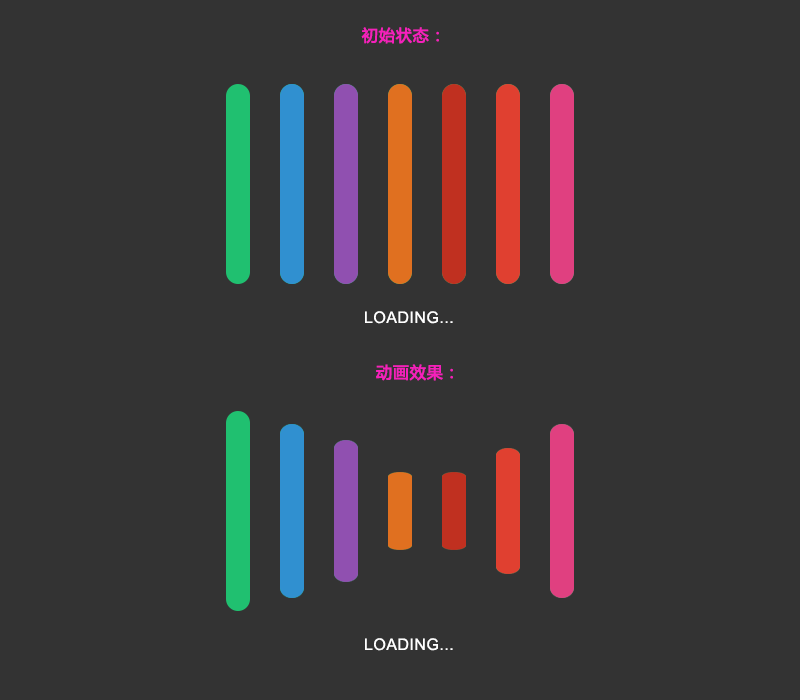
<style>
.page{position:relative;width:800px;height:700px;background:#333333}
.page>*{position:absolute;margin:0}
.t1{font:16px "MicrosoftYaHei";letter-spacing:0.03em;color:#f520bb;font-weight:bold}
.t2{font:16px "ArialMT";letter-spacing:0.03em;color:#ffffff}
</style>
<div class="page">
<p class="t1" style="left:361px;top:27px;width:78px;height:17px">初始状态：</p>
<p class="t2" style="left:365px;top:311px;width:88px;height:13px">LOADING...</p>
<p class="t1" style="left:376px;top:364px;width:77px;height:17px">动画效果：</p>
<p class="t2" style="left:365px;top:638px;width:88px;height:13px">LOADING...</p>
</div>
